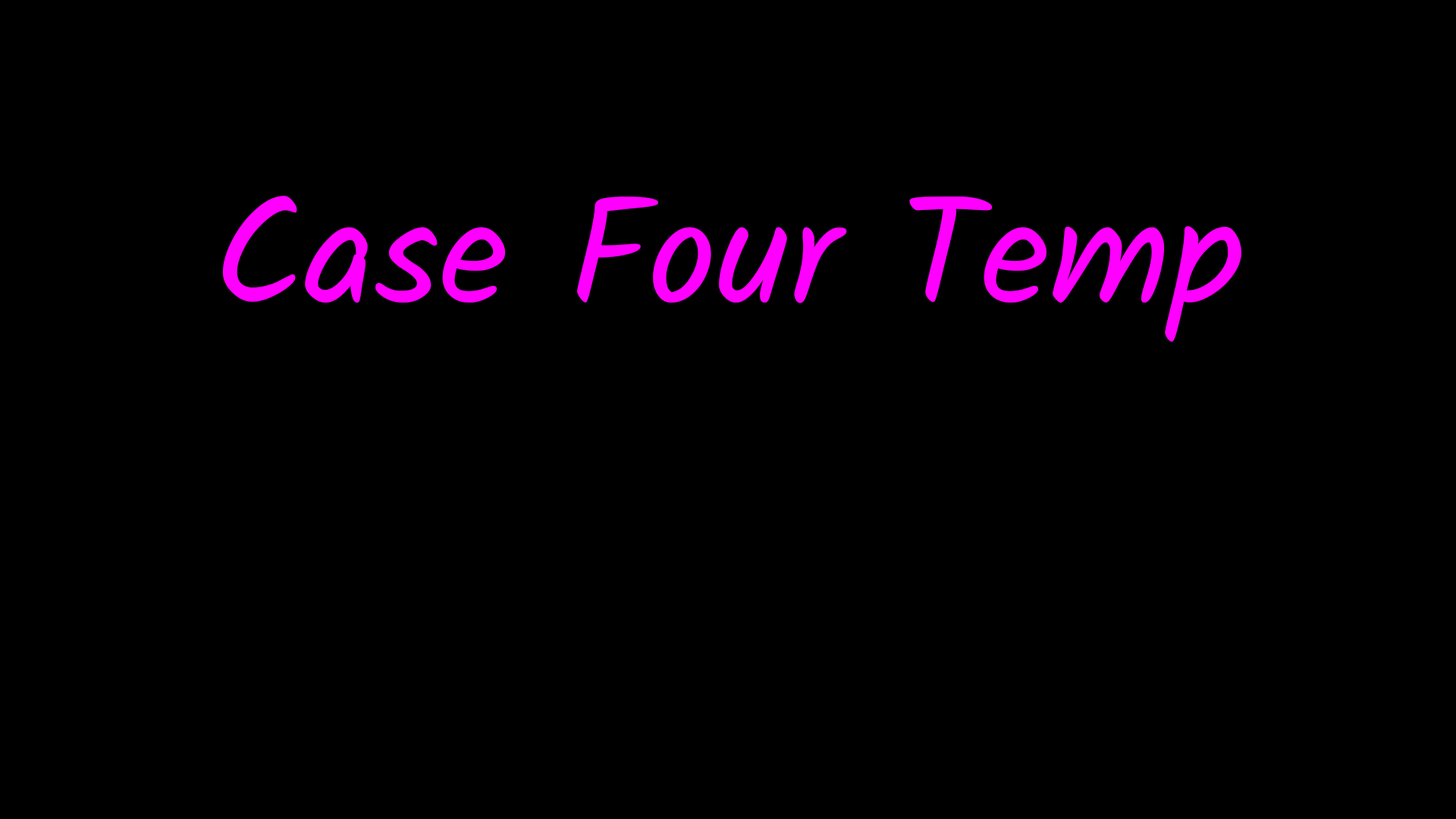
<style>
.page{position:relative;width:1456px;height:819px;background:#000000}
.page>*{position:absolute;margin:0}
.t1{font:151.7px "Kalam-Regular";color:#ff00ff}
</style>
<div class="page">
<p class="t1" style="left:223px;top:196px;width:1018px;height:146px">Case Four Temp</p>
</div>
